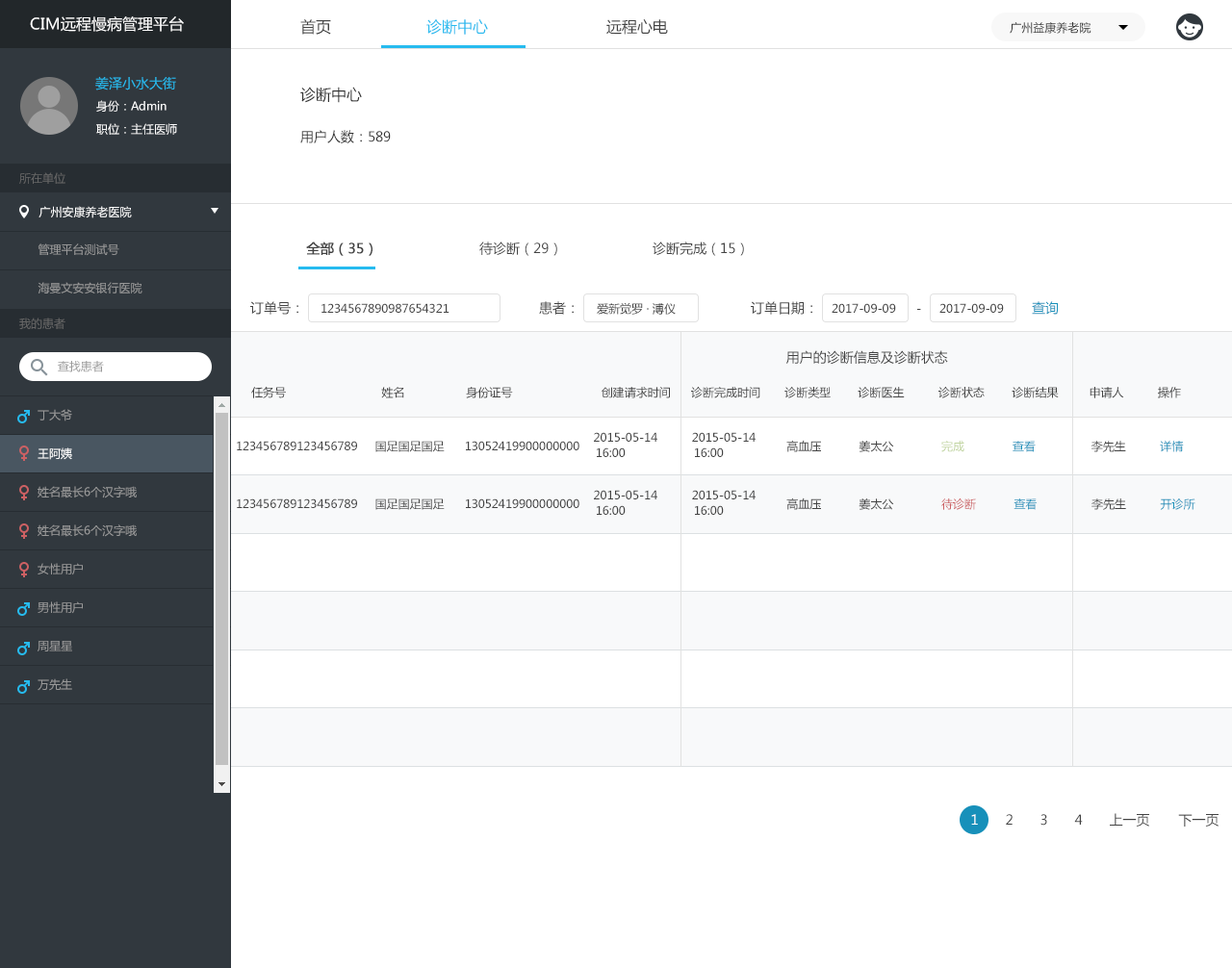
<style>
.page{position:relative;width:1232px;height:968px;background:#ffffff}
.page>*{position:absolute;margin:0}
.t1{font:15.4px "MicrosoftYaHei";color:#ffffff}
.t2{font:15.4px "MicrosoftYaHei";color:#434343}
.t3{font:15.4px "MicrosoftYaHei";color:#26bbef}
.t4{font:11.5px "MicrosoftYaHei";color:#333333}
.t5{font:13.5px "MicrosoftYaHei";color:#26bbef}
.t6{font:15.4px "MicrosoftYaHei";color:#333333}
.t7{font:11.5px "MicrosoftYaHei";color:#ffffff}
.t8{font:13.5px "MicrosoftYaHei";color:#333333}
.t9{font:11.5px "MicrosoftYaHei";color:#666666}
.t10{font:11.5px "MicrosoftYaHei";color:#999999}
.t11{font:13.5px "MicrosoftYaHei";color:#434343}
.t12{font:13.5px "MicrosoftYaHei";color:#434343;font-weight:bold}
.t13{font:11.5px "MicrosoftYaHei";color:#434343}
.t14{font:13.5px "MicrosoftYaHei";color:#1790ba}
.t15{font:11.5px/19.2px "MicrosoftYaHei";color:#999999}
.t16{font:11.5px/19.2px "MicrosoftYaHei";color:#ffffff}
.t17{font:11.5px/15.4px "MicrosoftYaHei";color:#434343}
.t18{font:11.5px/15.4px "MicrosoftYaHei";color:#c1d4a0}
.t19{font:11.5px/15.4px "MicrosoftYaHei";color:#1790ba}
.t20{font:11.5px/15.4px "MicrosoftYaHei";color:#cc6063}
.t21{font:13.5px "MicrosoftYaHei";color:#ffffff}
</style>
<div class="page">
<p class="t1" style="left:30px;top:16px;width:154px;height:16px">CIM远程慢病管理平台</p>
<p class="t2" style="left:300px;top:19px;width:31px;height:16px">首页</p>
<p class="t3" style="left:426px;top:19px;width:62px;height:16px">诊断中心</p>
<p class="t2" style="left:606px;top:19px;width:62px;height:16px">远程心电</p>
<p class="t4" style="left:1009px;top:22px;width:82px;height:12px">广州益康养老院</p>
<p class="t5" style="left:95px;top:76px;width:81px;height:14px">姜泽小水大街</p>
<p class="t6" style="left:300px;top:87px;width:62px;height:16px">诊断中心</p>
<p class="t7" style="left:96px;top:100px;width:70px;height:12px">身份：Admin</p>
<p class="t7" style="left:96px;top:123px;width:81px;height:12px">职位：主任医师</p>
<p class="t8" style="left:300px;top:130px;width:91px;height:13px">用户人数：589</p>
<p class="t9" style="left:19px;top:172px;width:46px;height:12px">所在单位</p>
<p class="t7" style="left:38px;top:206px;width:94px;height:12px">广州安康养老医院</p>
<p class="t10" style="left:38px;top:243px;width:81px;height:13px">管理平台测试号</p>
<p class="t11" style="left:306px;top:242px;width:438px;height:14px"><span class="t12">全部（35）</span>   待诊断（29）   诊断完成（15）</p>
<p class="t10" style="left:38px;top:282px;width:104px;height:12px">海曼文安安银行医院</p>
<p class="t11" style="left:250px;top:301px;width:48px;height:14px">订单号：</p>
<p class="t13" style="left:321px;top:303px;width:128px;height:10px">1234567890987654321</p>
<p class="t11" style="left:539px;top:301px;width:35px;height:14px">患者：</p>
<p class="t13" style="left:597px;top:302px;width:79px;height:13px">爱新觉罗 · 溥仪</p>
<p class="t11" style="left:751px;top:301px;width:61px;height:14px">订单日期：</p>
<p class="t13" style="left:831px;top:303px;width:65px;height:10px">2017-09-09</p>
<p class="t13" style="left:939px;top:303px;width:65px;height:10px">2017-09-09</p>
<p class="t14" style="left:1032px;top:301px;width:27px;height:14px">查询</p>
<p class="t9" style="left:19px;top:318px;width:46px;height:11px">我的患者</p>
<p class="t13" style="left:917px;top:309px;width:4px;height:1px">-</p>
<p class="t11" style="left:786px;top:350px;width:162px;height:15px">用户的诊断信息及诊断状态</p>
<p class="t10" style="left:58px;top:361px;width:46px;height:11px">查找患者</p>
<p class="t13" style="left:251px;top:386px;width:930px;height:12px">任务号                            姓名                  身份证号                          创建请求时间      诊断完成时间     诊断类型        诊断医生          诊断状态        诊断结果         申请人          操作</p>
<p class="t15" style="left:38px;top:409px;width:99px;height:282px">丁大爷<br><br><span class="t16">王阿姨<br></span><br>姓名最长6个汉字哦<br><br>姓名最长6个汉字哦<br><br>女性用户<br><br>男性用户<br><br>周星星<br><br>万先生<br><br>男女图表请区分<br><br>男性用户<br><br>男性用户<br><br>女性用户<br><br>工程师</p>
<p class="t17" style="left:237px;top:432px;width:947px;height:25px">123456789123456789     国足国足国足      13052419900000000    2015-05-14          2015-05-14         高血压           姜太公      <span class="t18">        完成              </span><span class="t19">查看</span>              李先生       <span class="t19">   详情 <br>                                         </span>16:00                    16:00</p>
<p class="t17" style="left:237px;top:490px;width:958px;height:25px">123456789123456789     国足国足国足      13052419900000000    2015-05-14          2015-05-14         高血压           姜太公              <span class="t20">待诊断           </span><span class="t19">查看</span>                李先生       <span class="t19">   开诊所 <br>                                         </span>16:00                    16:00</p>
<p class="t11" style="left:971px;top:813px;width:247px;height:14px"><span class="t21">1</span> 2 3 4 上一页 下一页</p>
</div>
